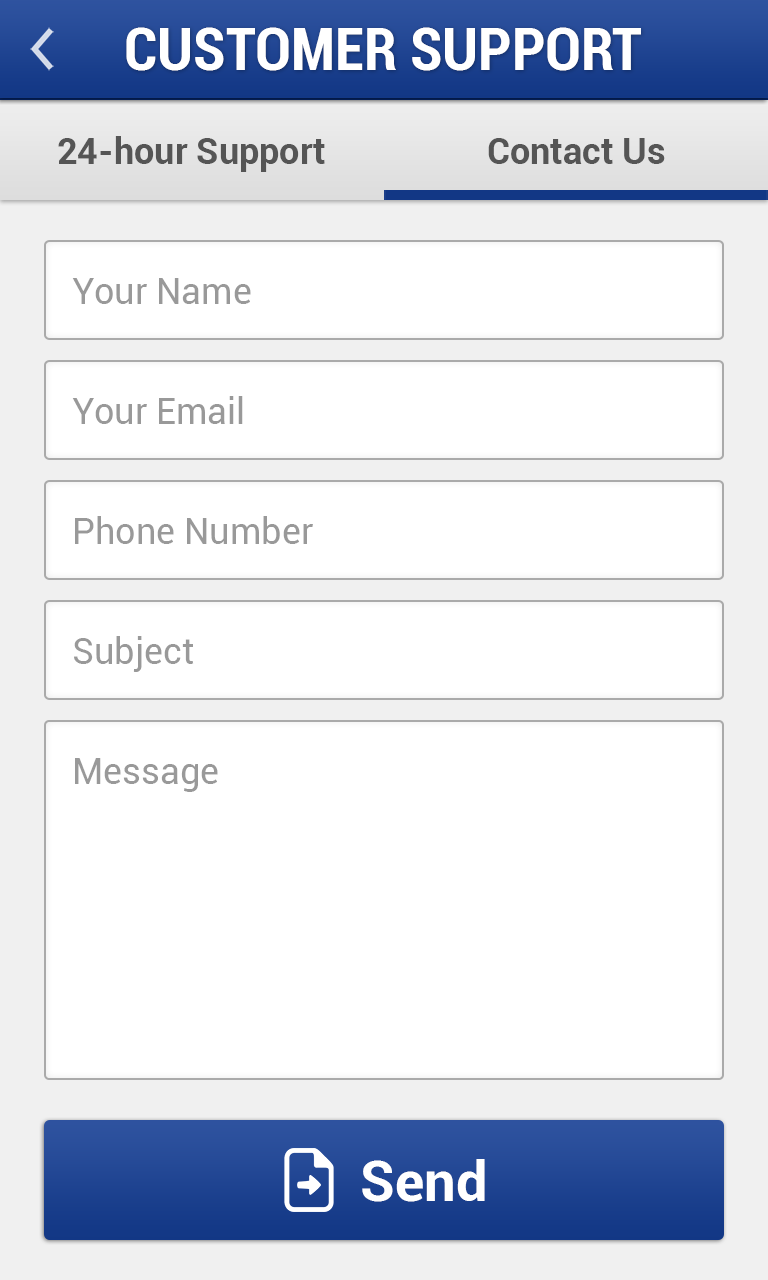
<style>
.page{position:relative;width:768px;height:1280px;background:#ffffff}
.page>*{position:absolute;margin:0}
.t1{font:60px "Roboto-BoldCondensed";color:#ffffff}
.t2{font:36px "Roboto-Bold";color:#555555}
.t3{font:36px "Roboto-Regular";color:#999999}
.t4{font:56px "Roboto-Bold";color:#ffffff}
</style>
<div class="page">
<p class="t1" style="left:126px;top:27px;width:515px;height:44px">CUSTOMER SUPPORT</p>
<p class="t2" style="left:58px;top:136px;width:267px;height:36px">24-hour Support</p>
<p class="t2" style="left:488px;top:138px;width:177px;height:26px">Contact Us</p>
<p class="t3" style="left:72px;top:278px;width:179px;height:26px">Your Name</p>
<p class="t3" style="left:72px;top:396px;width:171px;height:28px">Your Email</p>
<p class="t3" style="left:75px;top:516px;width:238px;height:28px">Phone Number</p>
<p class="t3" style="left:74px;top:636px;width:120px;height:36px">Subject</p>
<p class="t3" style="left:75px;top:758px;width:143px;height:34px">Message</p>
<p class="t4" style="left:362px;top:1159px;width:123px;height:43px">Send</p>
</div>
